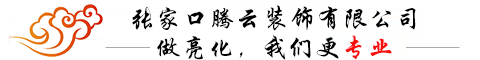
<style>
.page{position:relative;width:480px;height:60px;background:#ffffff}
.page>*{position:absolute;margin:0}
.t1{font:26px "STXingkai";letter-spacing:0.025em;color:#000000}
.t2{font:26px "STXingkai";letter-spacing:0.025em;color:#f90c0c}
</style>
<div class="page">
<p class="t1" style="left:132px;top:5px;width:284px;height:26px">张家口腾云装饰有限公司</p>
<p class="t1" style="left:157px;top:35px;width:235px;height:25px">做亮化，我们更<span class="t2">专业</span></p>
</div>
